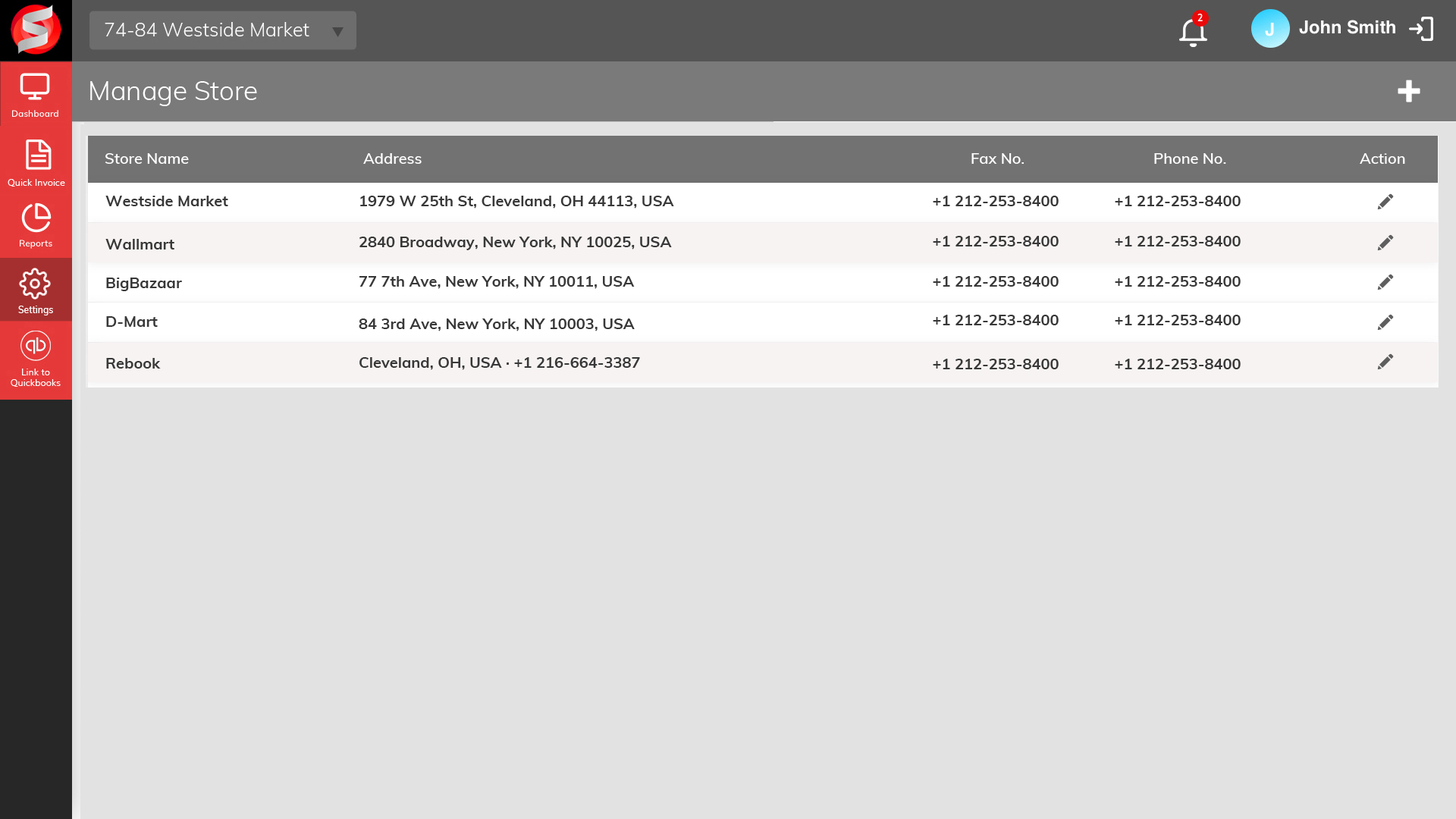
<style>
.page{position:relative;width:1456px;height:819px;background:#e2e2e2}
.page>*{position:absolute;margin:0}
.t1{font:26.5px "Muli-Light";color:#ffffff}
.t2{font:15.2px "Muli-SemiBold";color:#ffffff}
.t3{font:15.2px "Muli-Bold";color:#383838}
.t4{font:9.1px "Muli-SemiBold";color:#ffffff}
</style>
<div class="page">
<p class="t1" style="left:90px;top:81px;width:167px;height:25px">Manage Store</p>
<p class="t2" style="left:105px;top:153px;width:84px;height:11px">Store Name</p>
<p class="t2" style="left:363px;top:153px;width:59px;height:11px">Address</p>
<p class="t2" style="left:971px;top:153px;width:53px;height:11px">Fax No.</p>
<p class="t2" style="left:1154px;top:153px;width:72px;height:11px">Phone No.</p>
<p class="t2" style="left:1360px;top:153px;width:45px;height:11px">Action</p>
<p class="t3" style="left:105px;top:196px;width:123px;height:10px">Westside Market</p>
<p class="t3" style="left:360px;top:196px;width:314px;height:13px">1979 W 25th St, Cleveland, OH 44113, USA</p>
<p class="t3" style="left:933px;top:196px;width:126px;height:10px">+1 212-253-8400</p>
<p class="t3" style="left:1115px;top:196px;width:126px;height:10px">+1 212-253-8400</p>
<p class="t3" style="left:105px;top:239px;width:69px;height:10px">Wallmart</p>
<p class="t3" style="left:359px;top:237px;width:313px;height:13px">2840 Broadway, New York, NY 10025, USA</p>
<p class="t3" style="left:933px;top:236px;width:126px;height:10px">+1 212-253-8400</p>
<p class="t3" style="left:1115px;top:236px;width:126px;height:10px">+1 212-253-8400</p>
<p class="t3" style="left:106px;top:278px;width:76px;height:13px">BigBazaar</p>
<p class="t3" style="left:359px;top:276px;width:276px;height:13px">77 7th Ave, New York, NY 10011, USA</p>
<p class="t3" style="left:933px;top:276px;width:126px;height:11px">+1 212-253-8400</p>
<p class="t3" style="left:1115px;top:276px;width:126px;height:11px">+1 212-253-8400</p>
<p class="t4" style="left:18px;top:306px;width:35px;height:9px">Settings</p>
<p class="t3" style="left:106px;top:316px;width:52px;height:11px">D-Mart</p>
<p class="t3" style="left:933px;top:315px;width:126px;height:10px">+1 212-253-8400</p>
<p class="t3" style="left:1115px;top:315px;width:126px;height:10px">+1 212-253-8400</p>
<p class="t3" style="left:359px;top:318px;width:276px;height:13px">84 3rd Ave, New York, NY 10003, USA</p>
<p class="t3" style="left:106px;top:358px;width:55px;height:11px">Rebook</p>
<p class="t3" style="left:359px;top:357px;width:281px;height:13px">Cleveland, OH, USA · +1 216-664-3387</p>
<p class="t3" style="left:933px;top:359px;width:126px;height:10px">+1 212-253-8400</p>
<p class="t3" style="left:1115px;top:359px;width:126px;height:10px">+1 212-253-8400</p>
</div>
